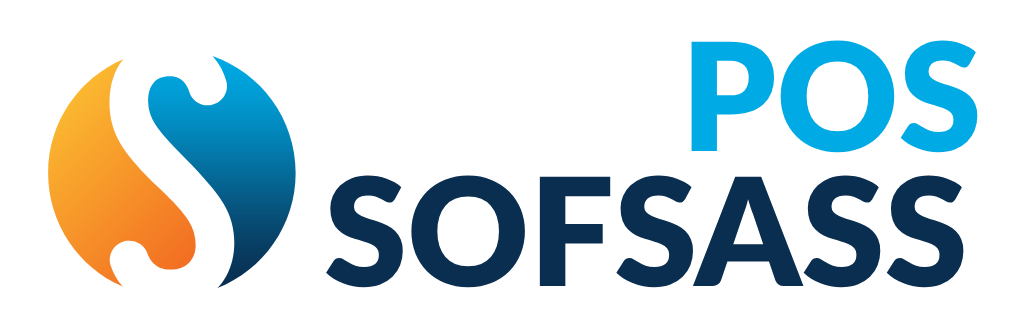
<style>
.page{position:relative;width:1035px;height:316px;background:#ffffff}
.page>*{position:absolute;margin:0}
.t1{font:150px "Lato-Black";color:#00aae5}
.t2{font:150px "Lato-Black";color:#0a2e50}
</style>
<div class="page">
<p class="t1" style="left:691px;top:40px;width:287px;height:113px">POS</p>
<p class="t2" style="left:326px;top:175px;width:638px;height:113px">SOFSASS</p>
</div>
